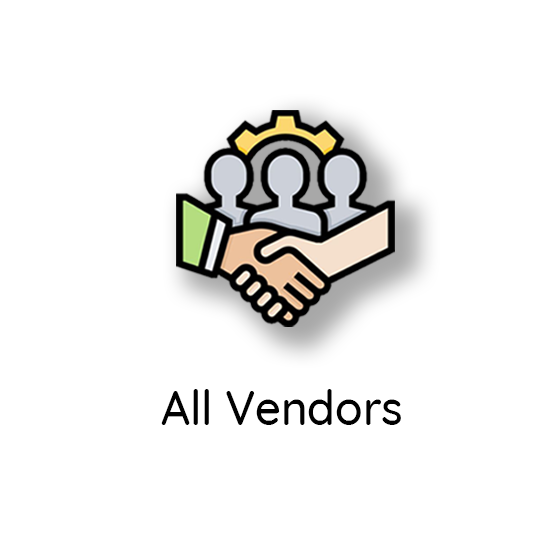
<style>
.page{position:relative;width:549px;height:549px;background:#ffffff}
.page>*{position:absolute;margin:0}
.t1{font:47.5px "Quicksand-Medium";color:#010101;scale:0.96 1}
</style>
<div class="page">
<p class="t1" style="left:161px;top:389px;width:240px;height:36px">All Vendors</p>
</div>
